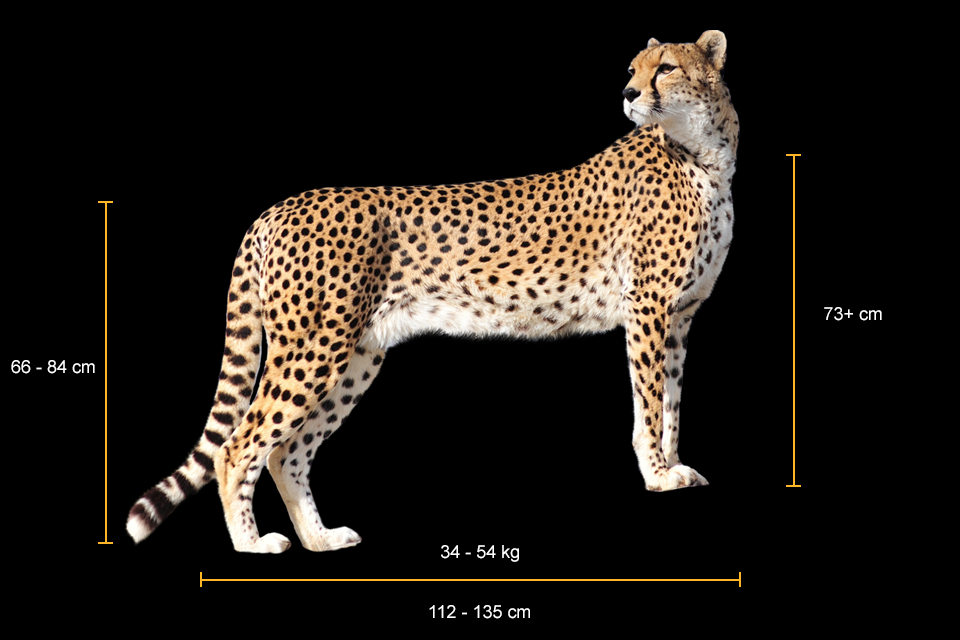
<style>
.page{position:relative;width:960px;height:640px;background:#000000}
.page>*{position:absolute;margin:0}
.t1{font:18px "ArialMT";color:#ffffff}
</style>
<div class="page">
<p class="t1" style="left:824px;top:307px;width:58px;height:14px">73+ cm</p>
<p class="t1" style="left:11px;top:360px;width:84px;height:14px">66 - 84 cm</p>
<p class="t1" style="left:441px;top:545px;width:78px;height:17px">34 - 54 kg</p>
<p class="t1" style="left:429px;top:605px;width:101px;height:14px">112 - 135 cm</p>
</div>
